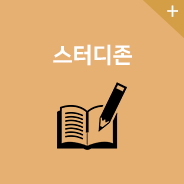
<style>
.page{position:relative;width:184px;height:184px;background:#e7b073}
.page>*{position:absolute;margin:0}
.t1{font:22px "NanumSquareR";color:#ffffff}
.t2{font:22px "NanumSquareEB";color:#ffffff}
</style>
<div class="page">
<p class="t1" style="left:167px;top:5px;width:11px;height:12px">+</p>
<p class="t2" style="left:53px;top:44px;width:79px;height:22px">스터디존</p>
</div>
